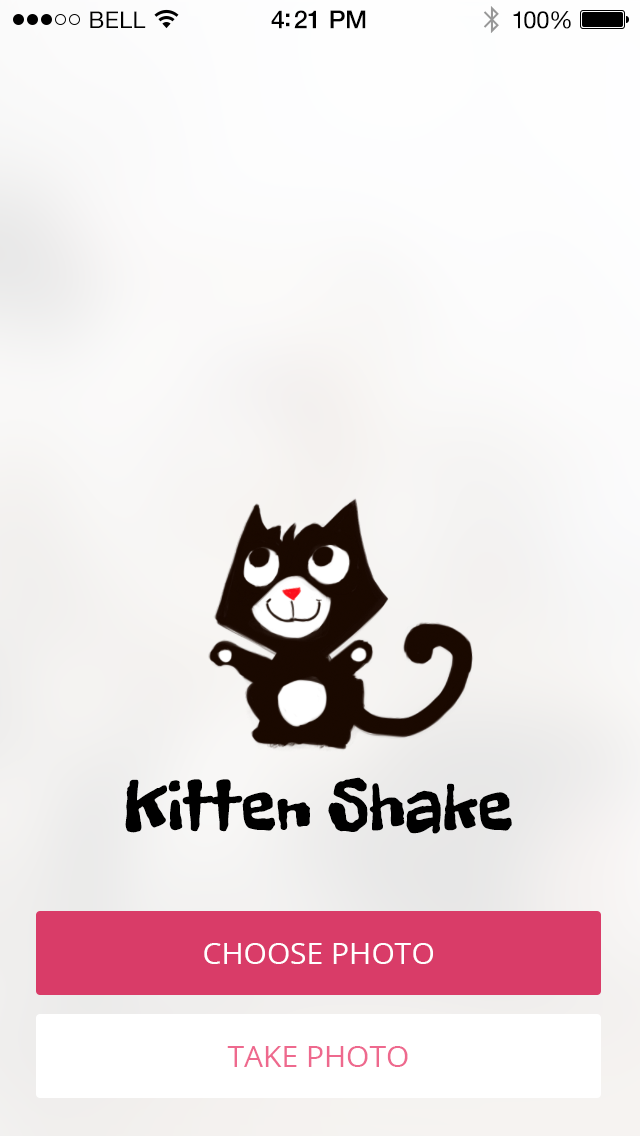
<style>
.page{position:relative;width:640px;height:1136px}
.page>*{position:absolute;margin:0}
.t1{font:23px "HelveticaNeue";letter-spacing:0.02em;color:#000000}
.t2{font:25px "HelveticaNeue-Medium";letter-spacing:-0.02em;color:#000000}
.t3{font:24px "HelveticaNeue";letter-spacing:-0.02em;color:#010101}
.t4{font:72px "FreckleFace-Regular";color:#000000}
.t5{font:30px "OpenSans";color:#ffffff}
.t6{font:30px "OpenSans";color:#ee698e}
</style>
<div class="page">
<p class="t1" style="left:90px;top:11px;width:56px;height:17px">BELL</p>
<p class="t2" style="left:271px;top:10px;width:95px;height:19px">4:21 PM</p>
<p class="t3" style="left:513px;top:11px;width:58px;height:18px">100%</p>
<p class="t4" style="left:125px;top:777px;width:387px;height:57px">Kitten Shake</p>
<p class="t5" style="left:204px;top:943px;width:229px;height:21px">CHOOSE PHOTO</p>
<p class="t6" style="left:227px;top:1046px;width:181px;height:21px">TAKE PHOTO</p>
</div>
